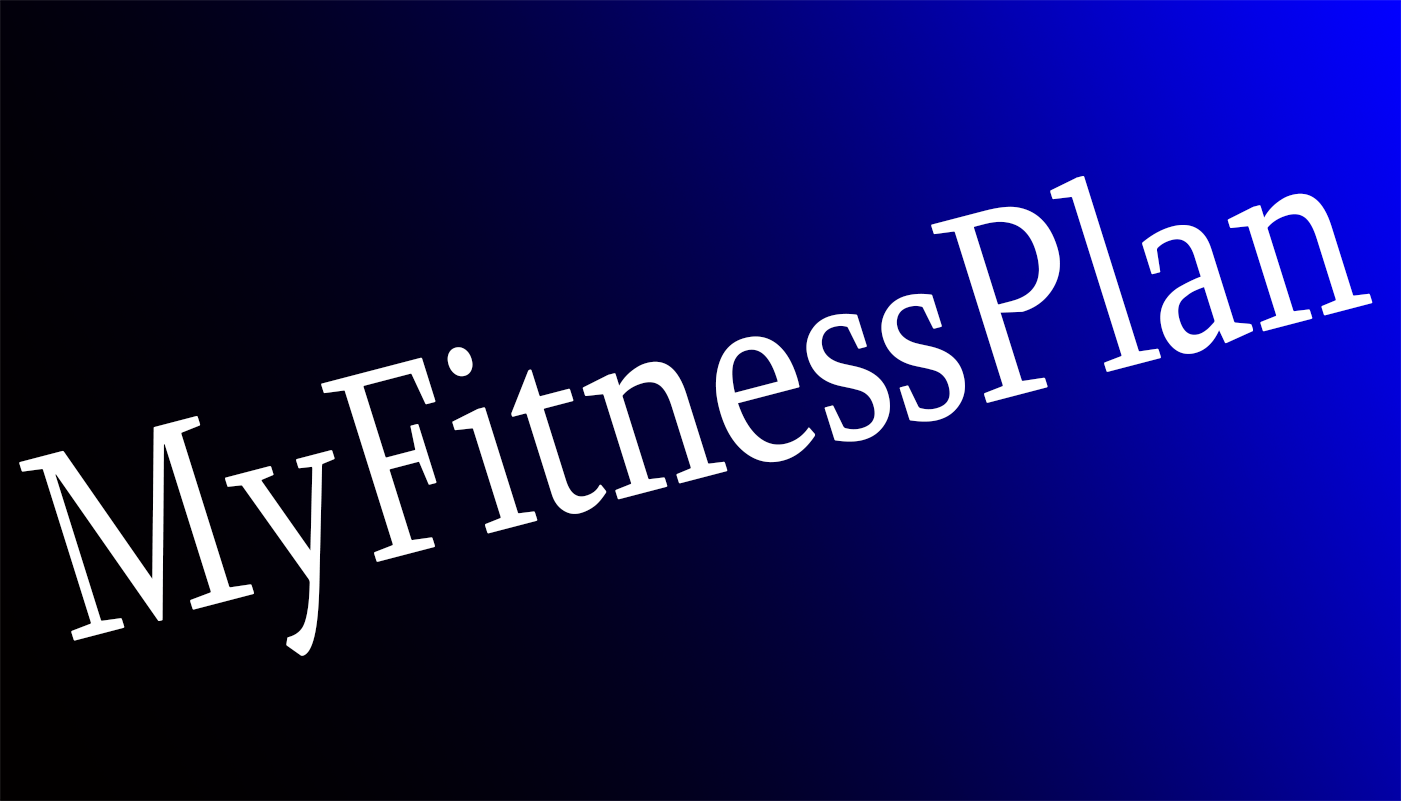
<style>
.page{position:relative;width:1401px;height:801px}
.page>*{position:absolute;margin:0}
.t1{font:277.4px "Sylfaen";color:#ffffff;scale:0.79 1}
</style>
<div class="page">
<p class="t1" style="left:19px;top:176px;width:1354px;height:480px;rotate:-15deg">MyFitnessPlan</p>
</div>
